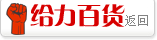
<style>
.page{position:relative;width:157px;height:40px;background:#ffffff}
.page>*{position:absolute;margin:0}
.t1{font:24px "GJJCQJW--GB1-0";color:#d70000}
.t2{font:12px "SimSun";color:#838383}
</style>
<div class="page">
<p class="t1" style="left:30px;top:4px;width:95px;height:23px">给力百货</p>
<p class="t2" style="left:125px;top:15px;width:23px;height:11px">返回</p>
</div>
